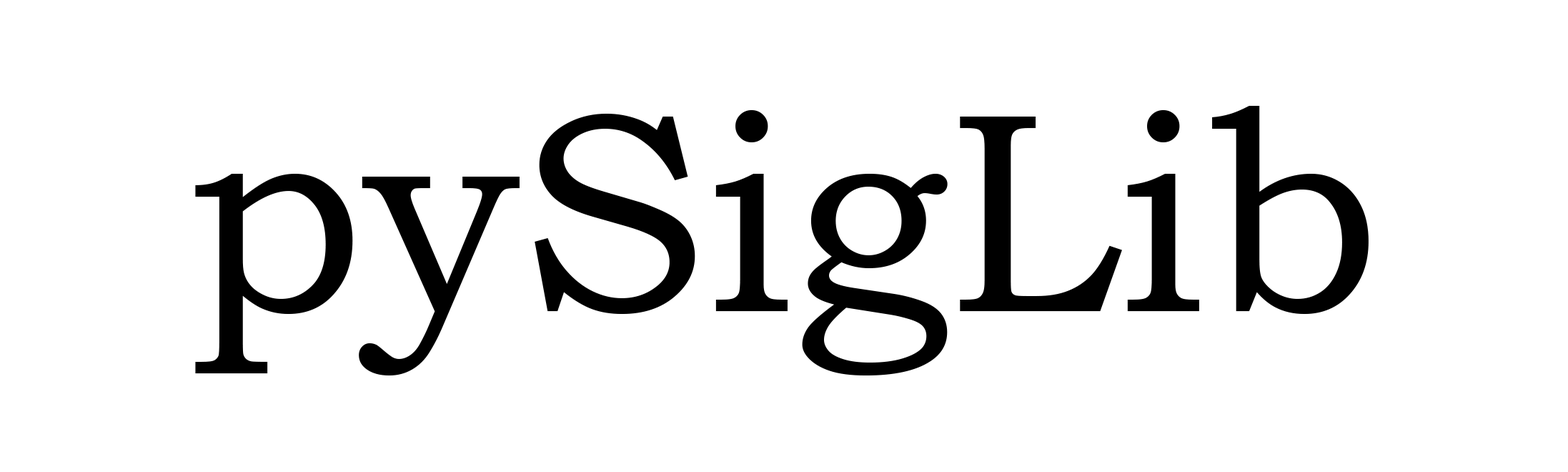
<style>
.page{position:relative;width:1568px;height:472px;background:#ffffff}
.page>*{position:absolute;margin:0}
.t1{font:285.9px "BookmanOldStyle";color:#000000}
</style>
<div class="page">
<p class="t1" style="left:195px;top:106px;width:1174px;height:269px">pySigLib</p>
</div>
